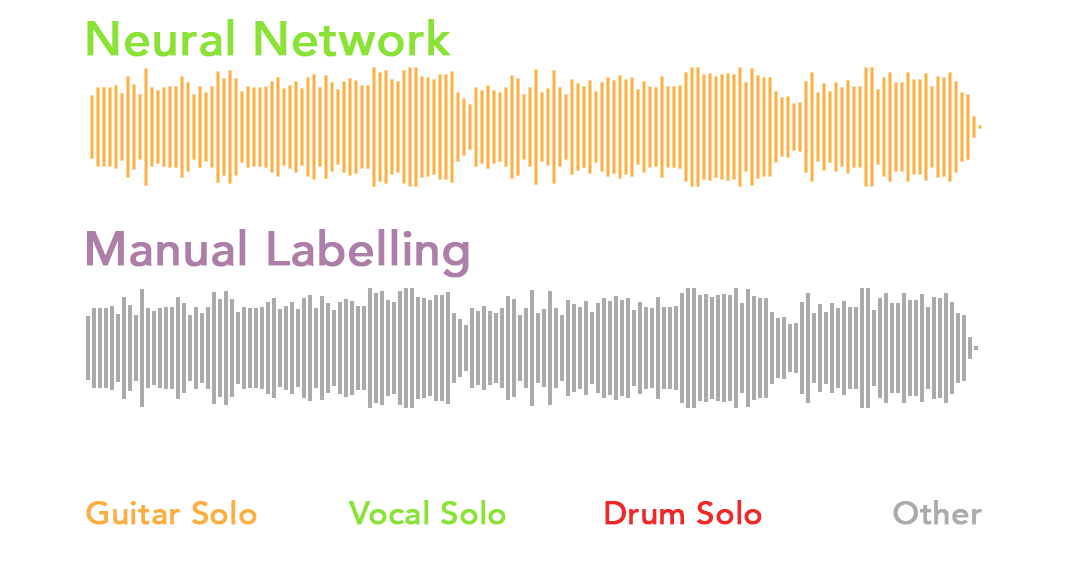
<style>
.page{position:relative;width:1080px;height:576px;background:#ffffff}
.page>*{position:absolute;margin:0}
.t1{font:48px "Avenir-Medium";color:#8ae234;font-weight:bold}
.t2{font:48px "Avenir-Medium";color:#ad7fa8;font-weight:bold}
.t3{font:32px "Avenir-Medium";color:#fcaf3e;font-weight:bold}
.t4{font:32px "Avenir-Medium";color:#8ae234;font-weight:bold}
.t5{font:32px "Avenir-Medium";color:#ef2929;font-weight:bold}
.t6{font:32px "Avenir-Medium";color:#a9abac;font-weight:bold}
</style>
<div class="page">
<p class="t1" style="left:87px;top:19px;width:364px;height:38px">Neural Network</p>
<p class="t2" style="left:87px;top:229px;width:382px;height:49px">Manual Labelling</p>
<p class="t3" style="left:86px;top:500px;width:171px;height:25px">Guitar Solo</p>
<p class="t4" style="left:348px;top:500px;width:158px;height:25px">Vocal Solo</p>
<p class="t5" style="left:605px;top:500px;width:157px;height:25px">Drum Solo</p>
<p class="t6" style="left:893px;top:500px;width:89px;height:25px">Other</p>
</div>
